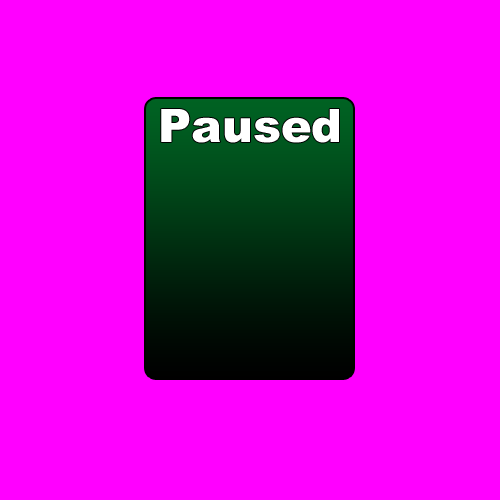
<style>
.page{position:relative;width:500px;height:500px;background:#ff00ff}
.page>*{position:absolute;margin:0}
.t1{font:46px "Arial-Black";color:#ffffff}
</style>
<div class="page">
<p class="t1" style="left:161px;top:109px;width:178px;height:34px">Paused</p>
</div>
